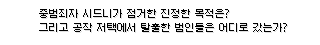
<style>
.page{position:relative;width:320px;height:45px;background:#ffffff}
.page>*{position:absolute;margin:0}
.t1{font:10px/14px "Galmuri9-Regular";color:#000000}
</style>
<div class="page">
<p class="t1" style="left:38px;top:9px;width:249px;height:23px">중범죄자 시드니가 점거한 진정한 목적은?<br>그리고 공작 저택에서 탈출한 범인들은 어디로 갔는가?</p>
</div>
